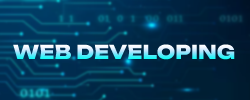
<style>
.page{position:relative;width:250px;height:100px}
.page>*{position:absolute;margin:0}
.t1{font:19px "Unbounded-ExtraBold";letter-spacing:0.005em;text-transform:uppercase}
</style>
<div class="page">
<p class="t1" style="left:13px;top:44px;width:222px;height:16px">Web Developing</p>
</div>
